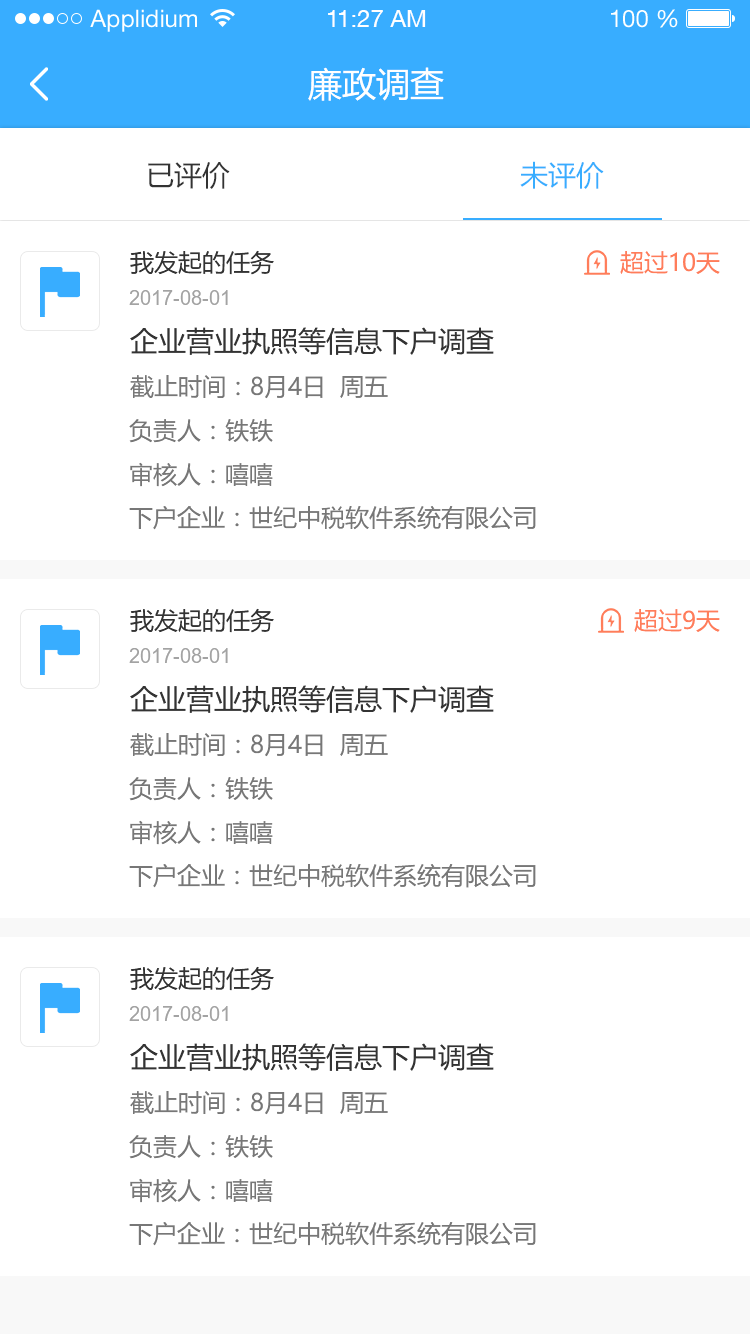
<style>
.page{position:relative;width:750px;height:1334px;background:#ffffff}
.page>*{position:absolute;margin:0}
.t1{font:24px "HelveticaNeueLTStd-Roman";color:#ffffff}
.t2{font:24px "HelveticaNeueCE-Roman";color:#ffffff}
.t3{font:34px "MicrosoftYaHei";color:#ffffff}
.t4{font:28px "MicrosoftYaHei";color:#38adff}
.t5{font:28px "MicrosoftYaHei";color:#333333}
.t6{font:24px "MicrosoftYaHei";color:#333333}
.t7{font:24px "MicrosoftYaHei";color:#ff7d5a}
.t8{font:20px "ArialMT";color:#a3a3a3}
.t9{font:24px "MicrosoftYaHei";color:#777777}
</style>
<div class="page">
<p class="t1" style="left:90px;top:9px;width:107px;height:23px">Applidium</p>
<p class="t2" style="left:328px;top:10px;width:98px;height:17px">11:27 AM</p>
<p class="t1" style="left:611px;top:9px;width:67px;height:19px">100 %</p>
<p class="t3" style="left:308px;top:67px;width:136px;height:34px">廉政调查</p>
<p class="t4" style="left:520px;top:161px;width:84px;height:28px">未评价</p>
<p class="t5" style="left:148px;top:162px;width:82px;height:27px">已评价</p>
<p class="t6" style="left:130px;top:250px;width:144px;height:25px">我发起的任务</p>
<p class="t7" style="left:620px;top:251px;width:100px;height:23px">超过10天</p>
<p class="t8" style="left:129px;top:290px;width:99px;height:15px">2017-08-01</p>
<p class="t5" style="left:130px;top:327px;width:364px;height:28px">企业营业执照等信息下户调查</p>
<p class="t9" style="left:130px;top:375px;width:258px;height:24px">截止时间：8月4日  周五</p>
<p class="t9" style="left:129px;top:419px;width:144px;height:24px">负责人：铁铁</p>
<p class="t9" style="left:130px;top:462px;width:143px;height:25px">审核人：嘻嘻</p>
<p class="t9" style="left:129px;top:506px;width:407px;height:24px">下户企业：世纪中税软件系统有限公司</p>
<p class="t6" style="left:130px;top:608px;width:144px;height:25px">我发起的任务</p>
<p class="t7" style="left:634px;top:609px;width:86px;height:23px">超过9天</p>
<p class="t8" style="left:129px;top:648px;width:99px;height:15px">2017-08-01</p>
<p class="t5" style="left:130px;top:685px;width:364px;height:28px">企业营业执照等信息下户调查</p>
<p class="t9" style="left:130px;top:733px;width:258px;height:24px">截止时间：8月4日  周五</p>
<p class="t9" style="left:129px;top:777px;width:144px;height:24px">负责人：铁铁</p>
<p class="t9" style="left:130px;top:820px;width:143px;height:25px">审核人：嘻嘻</p>
<p class="t9" style="left:129px;top:864px;width:407px;height:24px">下户企业：世纪中税软件系统有限公司</p>
<p class="t6" style="left:130px;top:966px;width:144px;height:25px">我发起的任务</p>
<p class="t8" style="left:129px;top:1006px;width:99px;height:15px">2017-08-01</p>
<p class="t5" style="left:130px;top:1043px;width:364px;height:28px">企业营业执照等信息下户调查</p>
<p class="t9" style="left:130px;top:1091px;width:258px;height:24px">截止时间：8月4日  周五</p>
<p class="t9" style="left:129px;top:1135px;width:144px;height:24px">负责人：铁铁</p>
<p class="t9" style="left:130px;top:1178px;width:143px;height:25px">审核人：嘻嘻</p>
<p class="t9" style="left:129px;top:1222px;width:407px;height:24px">下户企业：世纪中税软件系统有限公司</p>
</div>
